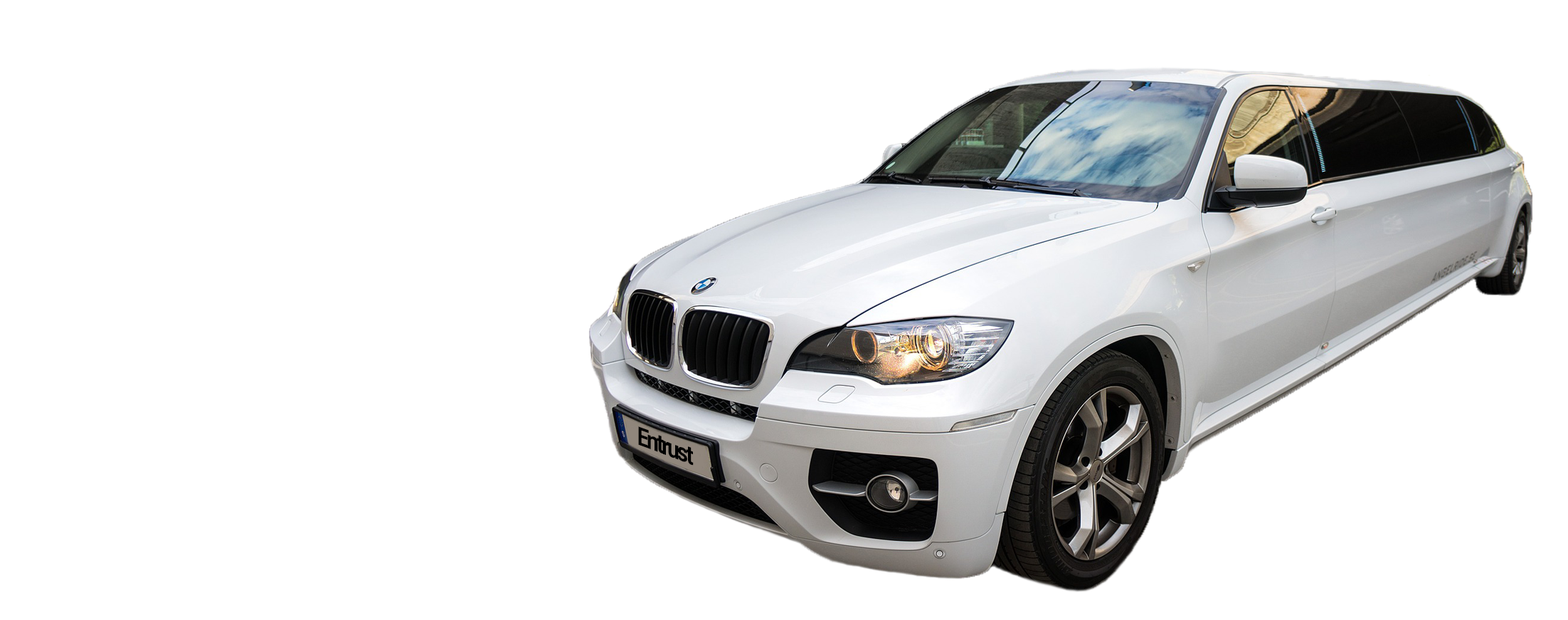
<style>
.page{position:relative;width:1568px;height:620px;background:#ffffff}
.page>*{position:absolute;margin:0}
.t1{font:25.6px "Roboto-Bold";letter-spacing:-0.1em;color:#000000;scale:0.9 1}
</style>
<div class="page">
<p class="t1" style="left:638px;top:426px;width:56px;height:39px;rotate:20deg">Entrust</p>
</div>
